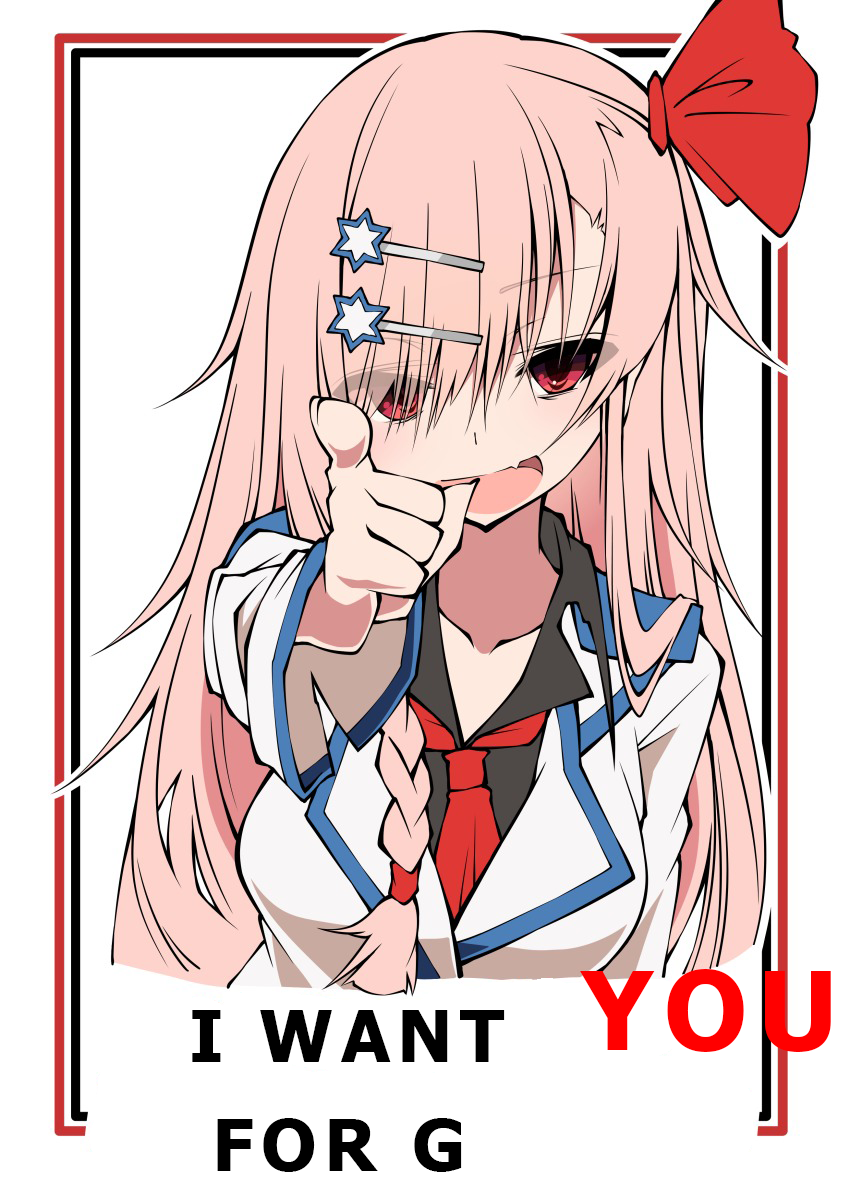
<style>
.page{position:relative;width:850px;height:1178px;background:#ffffff}
.page>*{position:absolute;margin:0}
.t1{font:108px "Tahoma-Bold";letter-spacing:0.1em;color:#ff0000}
.t2{font:72px "Tahoma-Bold";letter-spacing:0.1em;color:#000000}
</style>
<div class="page">
<p class="t1" style="left:580px;top:969px;width:251px;height:83px">YOU</p>
<p class="t2" style="left:192px;top:1010px;width:313px;height:52px">I WANT</p>
<p class="t2" style="left:217px;top:1118px;width:245px;height:54px">FOR G</p>
</div>
